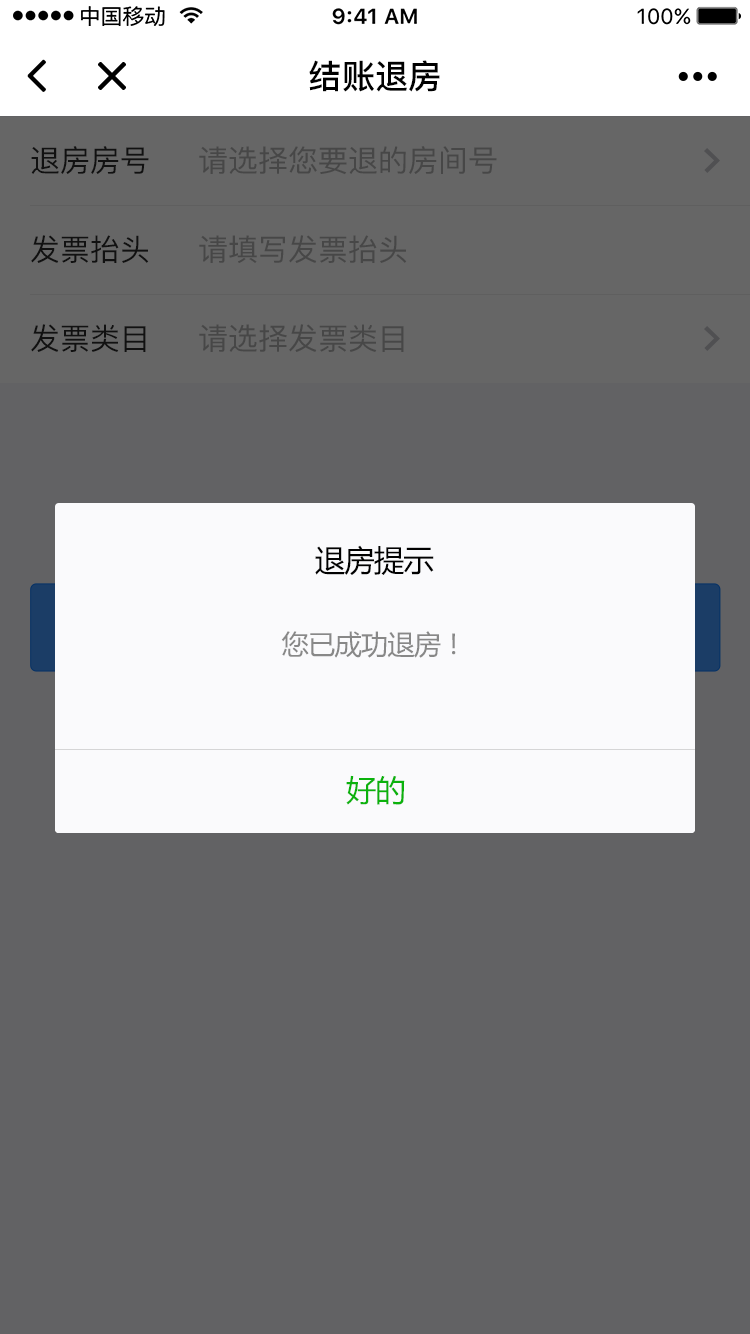
<style>
.page{position:relative;width:750px;height:1334px;background:#626264}
.page>*{position:absolute;margin:0}
.t1{font:33.2px "PingFang-SC-Bold";color:#000000}
.t2{font:30px "PingFang-SC-Medium";color:#111111}
.t3{font:30px "PingFang-SC-Medium";color:#474747}
.t4{font:30.2px "MicrosoftYaHei";letter-spacing:-0.026em;color:#010101}
.t5{font:27.2px "MicrosoftYaHei";letter-spacing:-0.026em;color:#888888}
.t6{font:30.2px "MicrosoftYaHei";letter-spacing:-0.026em;color:#0bb20c}
</style>
<div class="page">
<p class="t1" style="left:309px;top:60px;width:131px;height:32px">结账退房</p>
<p class="t2" style="left:31px;top:146px;width:118px;height:28px">退房房号</p>
<p class="t3" style="left:199px;top:146px;width:298px;height:29px">请选择您要退的房间号</p>
<p class="t2" style="left:31px;top:235px;width:118px;height:28px">发票抬头</p>
<p class="t3" style="left:199px;top:235px;width:208px;height:28px">请填写发票抬头</p>
<p class="t2" style="left:31px;top:324px;width:115px;height:28px">发票类目</p>
<p class="t3" style="left:199px;top:324px;width:205px;height:28px">请选择发票类目</p>
<p class="t4" style="left:315px;top:545px;width:119px;height:30px">退房提示</p>
<p class="t5" style="left:281px;top:631px;width:175px;height:27px">您已成功退房！</p>
<p class="t6" style="left:346px;top:775px;width:59px;height:30px">好的</p>
</div>
